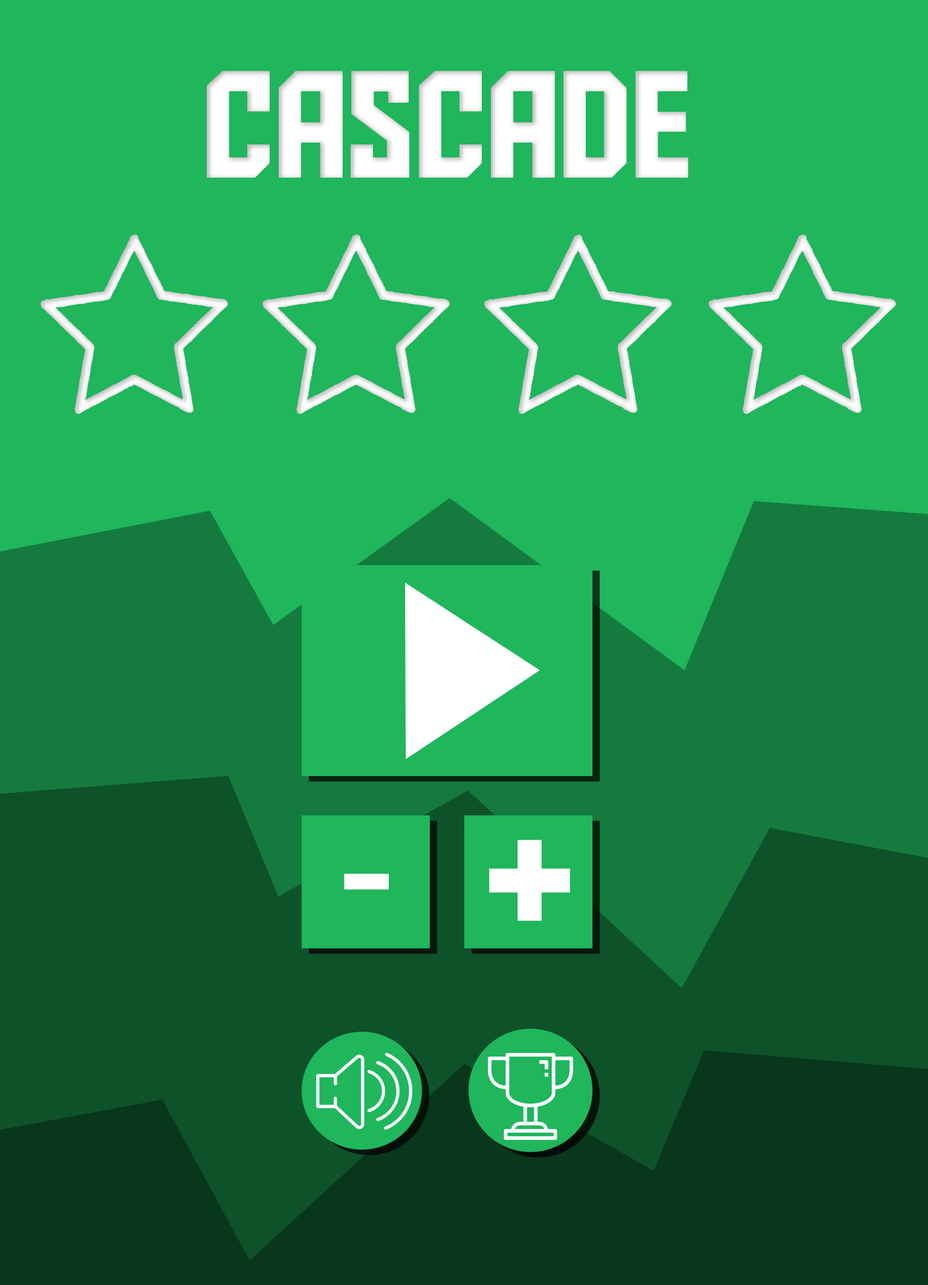
<style>
.page{position:relative;width:928px;height:1285px;background:#1fb65c}
.page>*{position:absolute;margin:0}
.t1{font:151px "AldotheApache";color:#ffffff}
.t2{font:151.1px "AldotheApache";color:#ffffff}
.t3{font:151.1px "AldotheApache";color:#ffffff;scale:1.4 1}
</style>
<div class="page">
<p class="t1" style="left:207px;top:71px;width:482px;height:107px">Cascade</p>
<p class="t2" style="left:489px;top:840px;width:81px;height:81px">+</p>
<p class="t3" style="left:344px;top:873px;width:45px;height:17px">-</p>
</div>
